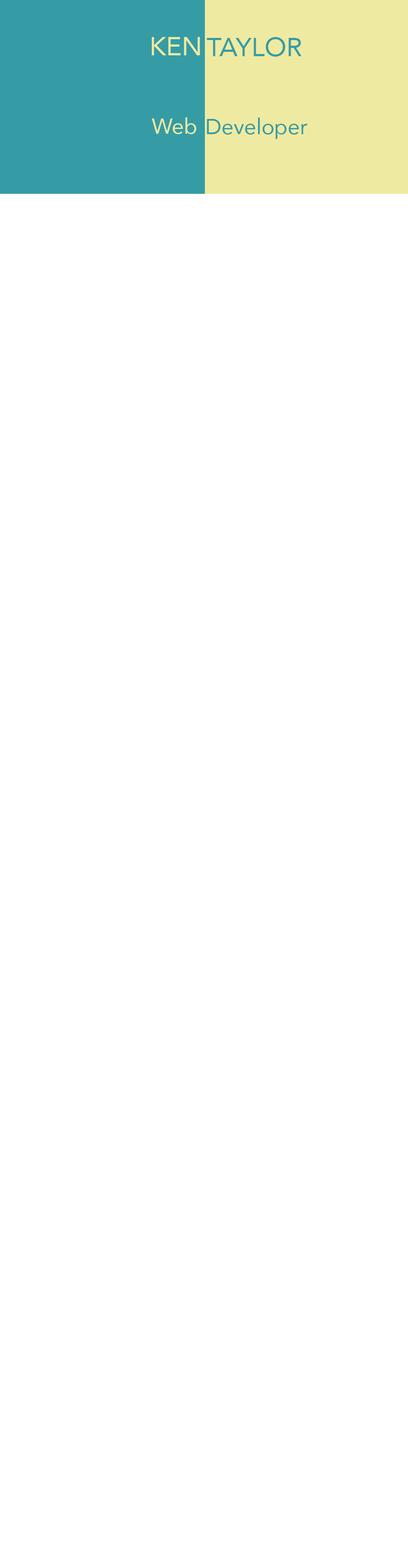
<style>
.page{position:relative;width:408px;height:1568px;background:#ffffff}
.page>*{position:absolute;margin:0}
.t1{font:26.1px "Avenir-Roman";color:#efeaa1}
.t2{font:26.1px "Avenir-Roman";color:#359ca5}
.t3{font:21.8px "Avenir-Roman";color:#efeaa1}
.t4{font:21.8px "Avenir-Roman";color:#359ca5}
</style>
<div class="page">
<p class="t1" style="left:152px;top:37px;width:48px;height:18px">KEN</p>
<p class="t2" style="left:206px;top:37px;width:95px;height:20px">TAYLOR</p>
<p class="t3" style="left:152px;top:117px;width:44px;height:17px">Web</p>
<p class="t4" style="left:206px;top:118px;width:101px;height:21px">Developer</p>
</div>
